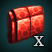
<style>
.page{position:relative;width:52px;height:52px}
.page>*{position:absolute;margin:0}
.t1{font:14px "Vani";color:#dadada}
</style>
<div class="page">
<p class="t1" style="left:33px;top:36px;width:11px;height:10px">X</p>
</div>
